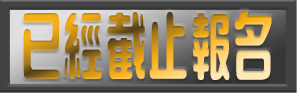
<style>
.page{position:relative;width:300px;height:100px}
.page>*{position:absolute;margin:0}
.t1{font:78.4px "JetLink-MediumRoundArt";scale:0.54 1}
</style>
<div class="page">
<p class="t1" style="left:23px;top:10px;width:249px;height:70px">已經截止報名</p>
</div>
